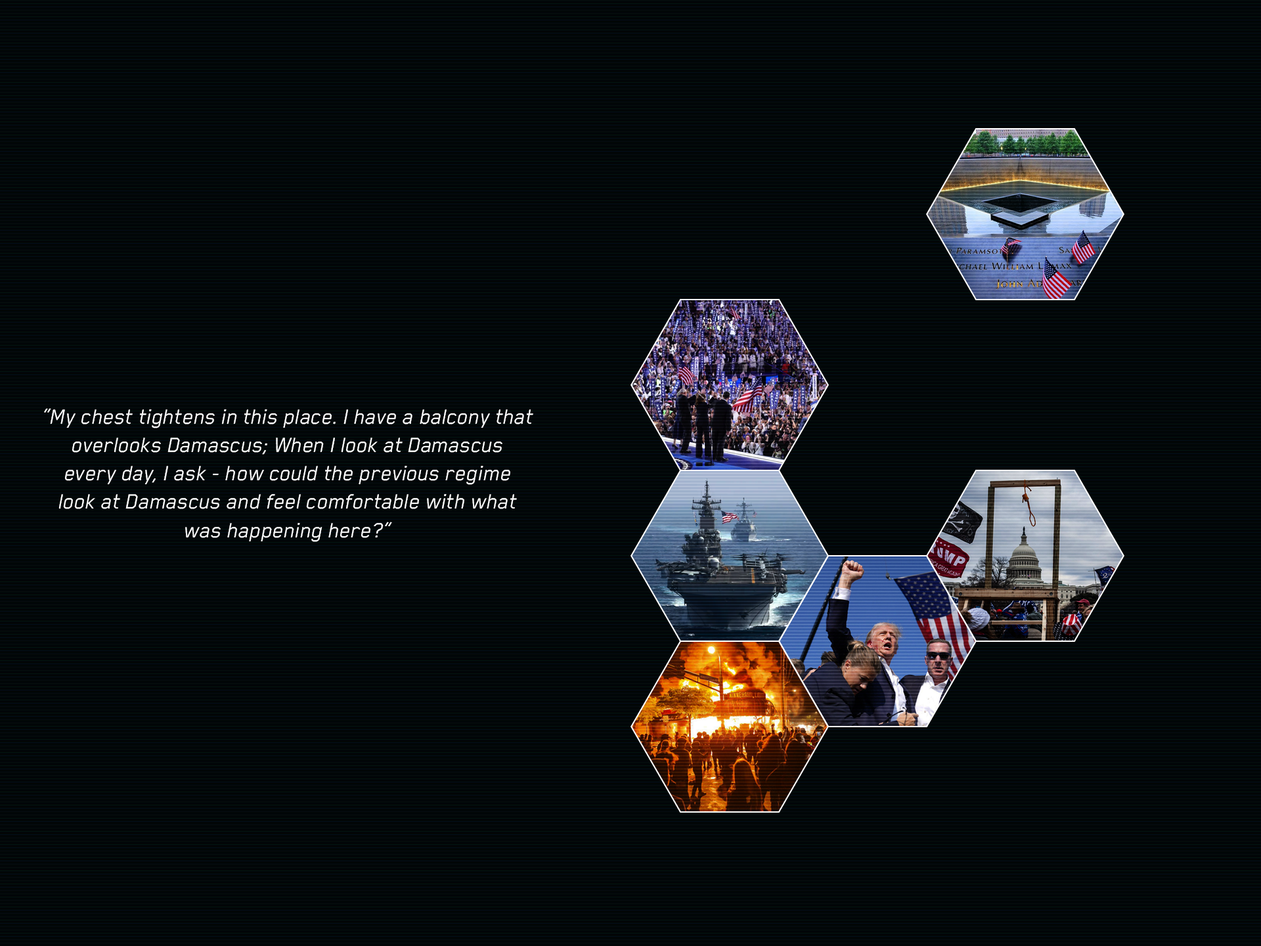
<style>
.page{position:relative;width:1261px;height:946px}
.page>*{position:absolute;margin:0}
.t1{font:23.6px "BlenderPro-BookItalic";color:#ffffff}
</style>
<div class="page">
<p class="t1" style="left:44px;top:408px;width:489px;height:134px;text-align:center">“My chest tightens in this place. I have a balcony that<br>overlooks Damascus; When I look at Damascus<br>every day, I ask - how could the previous regime<br>look at Damascus and feel comfortable with what<br>was happening here?”</p>
</div>
